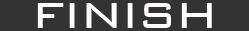
<style>
.page{position:relative;width:249px;height:31px;background:#333333}
.page>*{position:absolute;margin:0}
.t1{font:60px "BankGothicBT-Light";color:#fefbfb}
</style>
<div class="page">
<p class="t1" style="left:37px;top:3px;width:175px;height:25px">finish</p>
</div>
